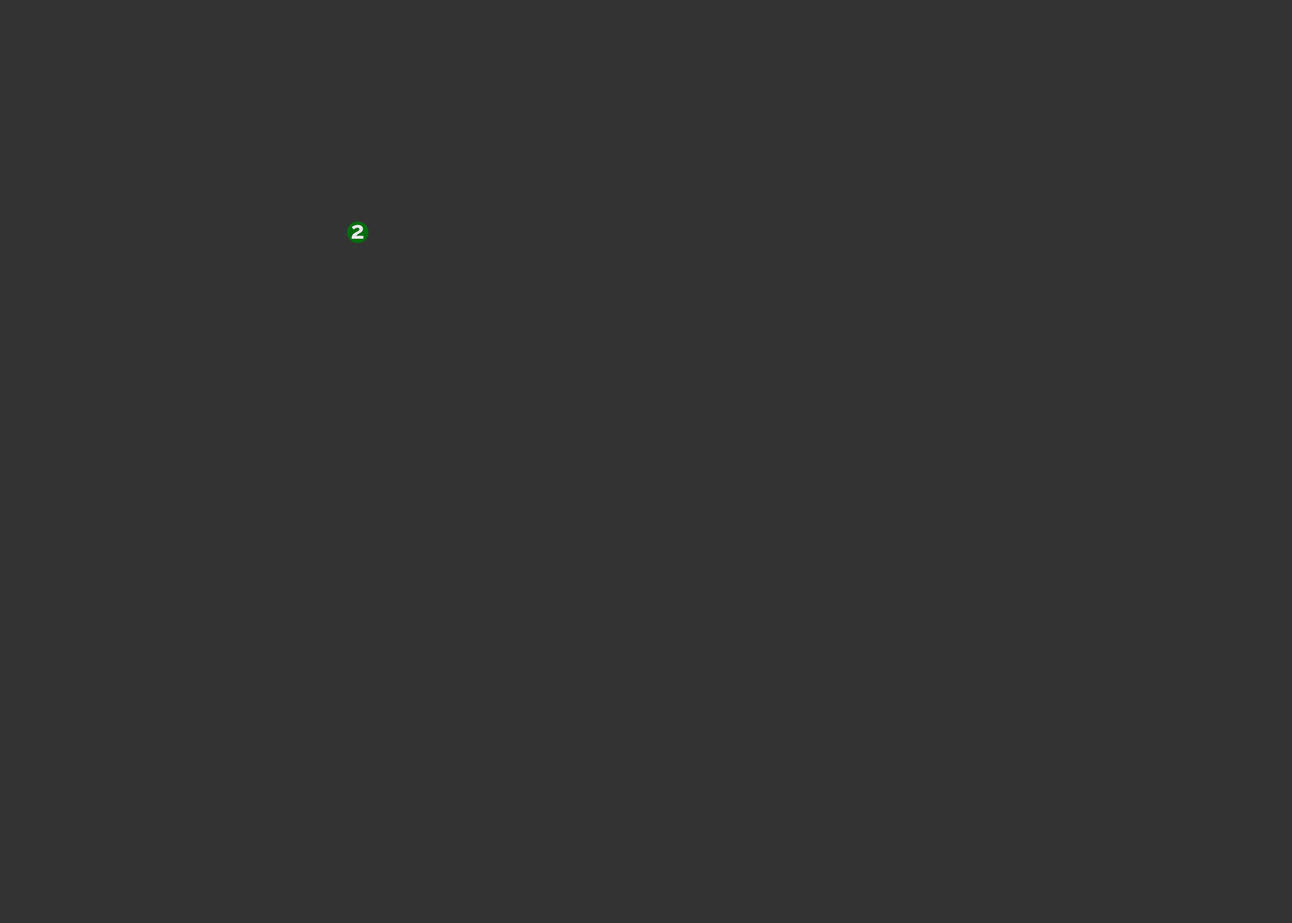
<style>
.page{position:relative;width:1292px;height:923px;background:#333333}
.page>*{position:absolute;margin:0}
.t1{font:24px "Raleway-Bold";color:#e8e8e8}
</style>
<div class="page">
<p class="t1" style="left:351px;top:225px;width:13px;height:14px">2</p>
</div>
